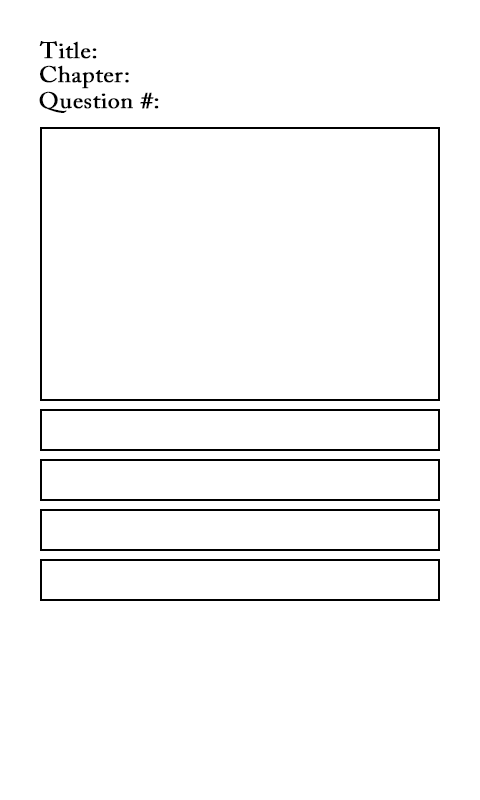
<style>
.page{position:relative;width:480px;height:800px;background:#ffffff}
.page>*{position:absolute;margin:0}
.t1{font:22.5px "ACaslonPro-Regular";color:#000000;font-weight:bold;scale:1.07 1}
</style>
<div class="page">
<p class="t1" style="left:39px;top:41px;width:58px;height:18px">Title:</p>
<p class="t1" style="left:40px;top:65px;width:89px;height:24px">Chapter:</p>
<p class="t1" style="left:39px;top:91px;width:120px;height:22px">Question #:</p>
</div>
